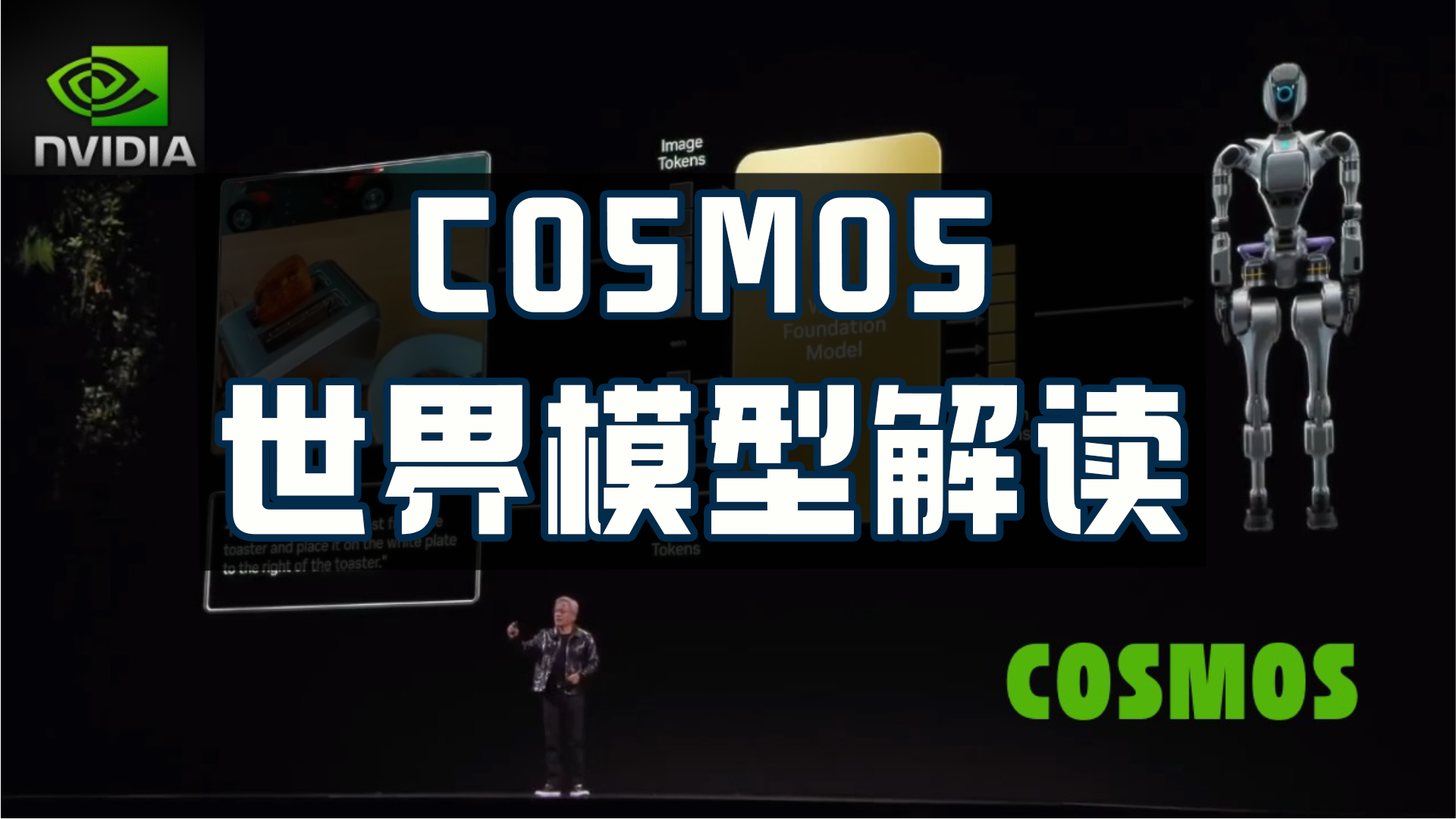
<style>
.page{position:relative;width:1456px;height:819px}
.page>*{position:absolute;margin:0}
.t1{font:166.8px/204.7px "098-";letter-spacing:0.05em;color:#fefffa}
</style>
<div class="page">
<p class="t1" style="left:222px;top:196px;width:959px;height:339px;text-align:center">COSMOS<br>世界模型解读</p>
</div>
